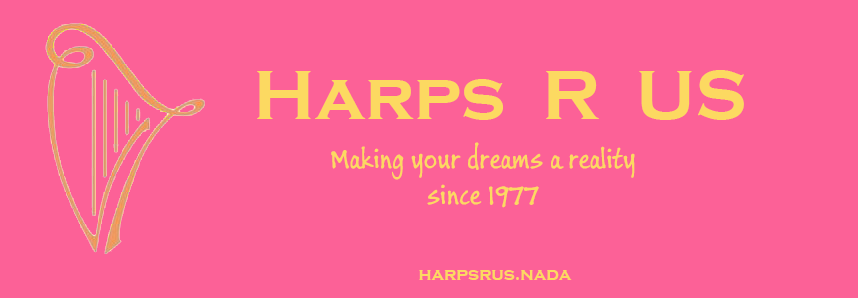
<style>
.page{position:relative;width:858px;height:298px;background:#fc6197}
.page>*{position:absolute;margin:0}
.t1{font:72px "CopperplateGothic-Bold";color:#fcd961}
.t2{font:30px "BuxtonSketch";color:#fcd961}
.t3{font:18px "CopperplateGothic-Bold";color:#fcd961}
</style>
<div class="page">
<p class="t1" style="left:257px;top:70px;width:487px;height:50px">Harps  R  US</p>
<p class="t2" style="left:331px;top:142px;width:304px;height:66px;text-align:center">Making your dreams a reality<br>since 1977</p>
<p class="t3" style="left:419px;top:270px;width:153px;height:10px">harpsrus.nada</p>
</div>
